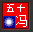
<style>
.page{position:relative;width:33px;height:32px;background:#f20000}
.page>*{position:absolute;margin:0}
.t1{font:10.4px "SimSun";color:#ffffff}
.t2{font:11.7px "SimSun";color:#ffffff}
</style>
<div class="page">
<p class="t1" style="left:7px;top:4px;width:18px;height:8px">五十</p>
<p class="t2" style="left:16px;top:15px;width:11px;height:12px">冯</p>
</div>
